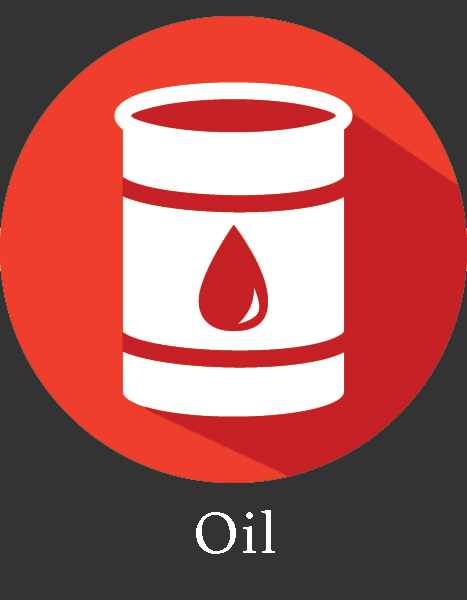
<style>
.page{position:relative;width:467px;height:600px;background:#333333}
.page>*{position:absolute;margin:0}
.t1{font:62.5px "Athelas-Regular";letter-spacing:0.02em;color:#ffffff}
</style>
<div class="page">
<p class="t1" style="left:196px;top:510px;width:79px;height:44px">Oil</p>
</div>
